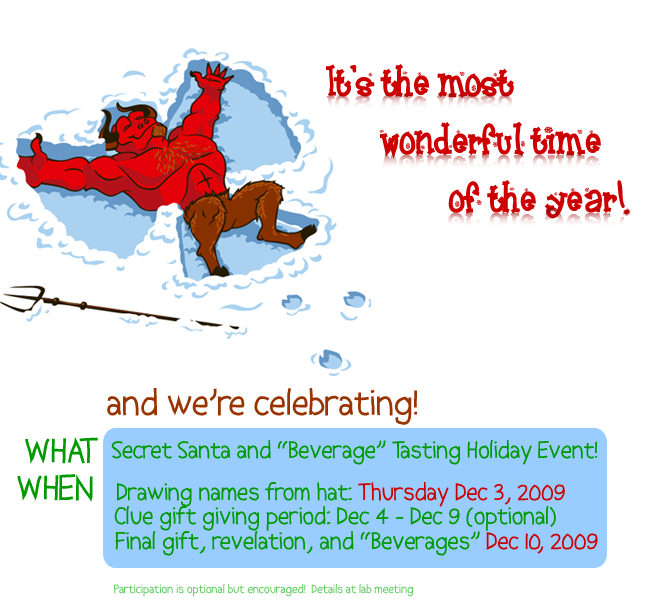
<style>
.page{position:relative;width:648px;height:612px;background:#ffffff}
.page>*{position:absolute;margin:0}
.t1{font:36px/75px "Frosty";color:#cc0000}
.t2{font:36px/75px "Abscissa";color:#993300}
.t3{font:36px/75px "Frosty";color:#ffcc00}
.t4{font:36px/75px "Abscissa";color:#009900}
.t5{font:24px "Abscissa";color:#009900}
.t6{font:24px "Abscissa";color:#cc0000}
.t7{font:12px "Abscissa";color:#66cc66}
</style>
<div class="page">
<p class="t1" style="left:326px;top:64px;width:188px;height:34px;text-align:center">It's the most<br>s's t</p>
<p class="t1" style="left:379px;top:121px;width:222px;height:38px;text-align:center">wonderful time<br>s's t</p>
<p class="t1" style="left:448px;top:180px;width:183px;height:39px;text-align:center">of the year!<br>s's t</p>
<p class="t2" style="left:107px;top:388px;width:310px;height:37px;text-align:center">and we’re celebrating!<br><span class="t3">T</span></p>
<p class="t4" style="left:25px;top:437px;width:73px;height:27px;text-align:center">WHAT<br><span class="t3">T</span></p>
<p class="t5" style="left:111px;top:440px;width:486px;height:25px">Secret Santa and “Beverage” Tasting Holiday Event!</p>
<p class="t4" style="left:17px;top:474px;width:76px;height:28px;text-align:center">WHEN<br><span class="t3">T</span></p>
<p class="t5" style="left:117px;top:482px;width:448px;height:25px">Drawing names from hat: <span class="t6">Thursday Dec 3, 2009</span></p>
<p class="t5" style="left:114px;top:506px;width:442px;height:25px">Clue gift giving period: Dec 4 - Dec 9 (optional)</p>
<p class="t5" style="left:115px;top:531px;width:483px;height:25px">Final gift, revelation, and “Beverages” <span class="t6">Dec 10, 2009</span></p>
<p class="t7" style="left:114px;top:584px;width:299px;height:13px">Participation is optional but encouraged!  Details at lab meeting</p>
</div>
